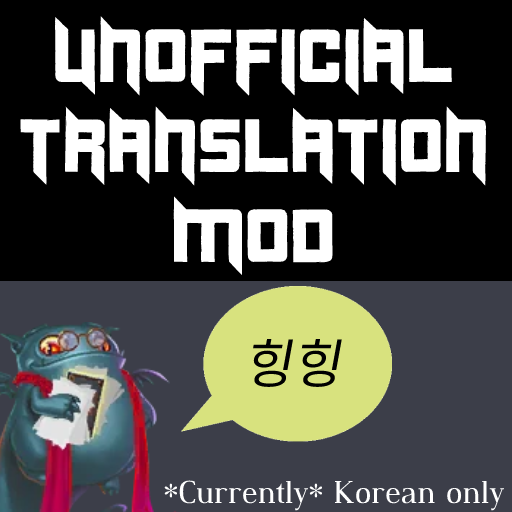
<style>
.page{position:relative;width:512px;height:512px;background:#000000}
.page>*{position:absolute;margin:0}
.t1{font:75px "Duplexide";color:#ffffff}
.t2{font:53px "NotoSansKR-Regular";color:#000000;font-style:italic}
.t3{font:31px "DustismoRoman";color:#ffffff}
</style>
<div class="page">
<p class="t1" style="left:20px;top:16px;width:466px;height:260px;text-align:center">Unofficial<br>Translation<br>Mod</p>
<p class="t2" style="left:253px;top:339px;width:89px;height:48px">힝힝</p>
<p class="t3" style="left:164px;top:480px;width:341px;height:31px">*Currently* Korean only</p>
</div>
